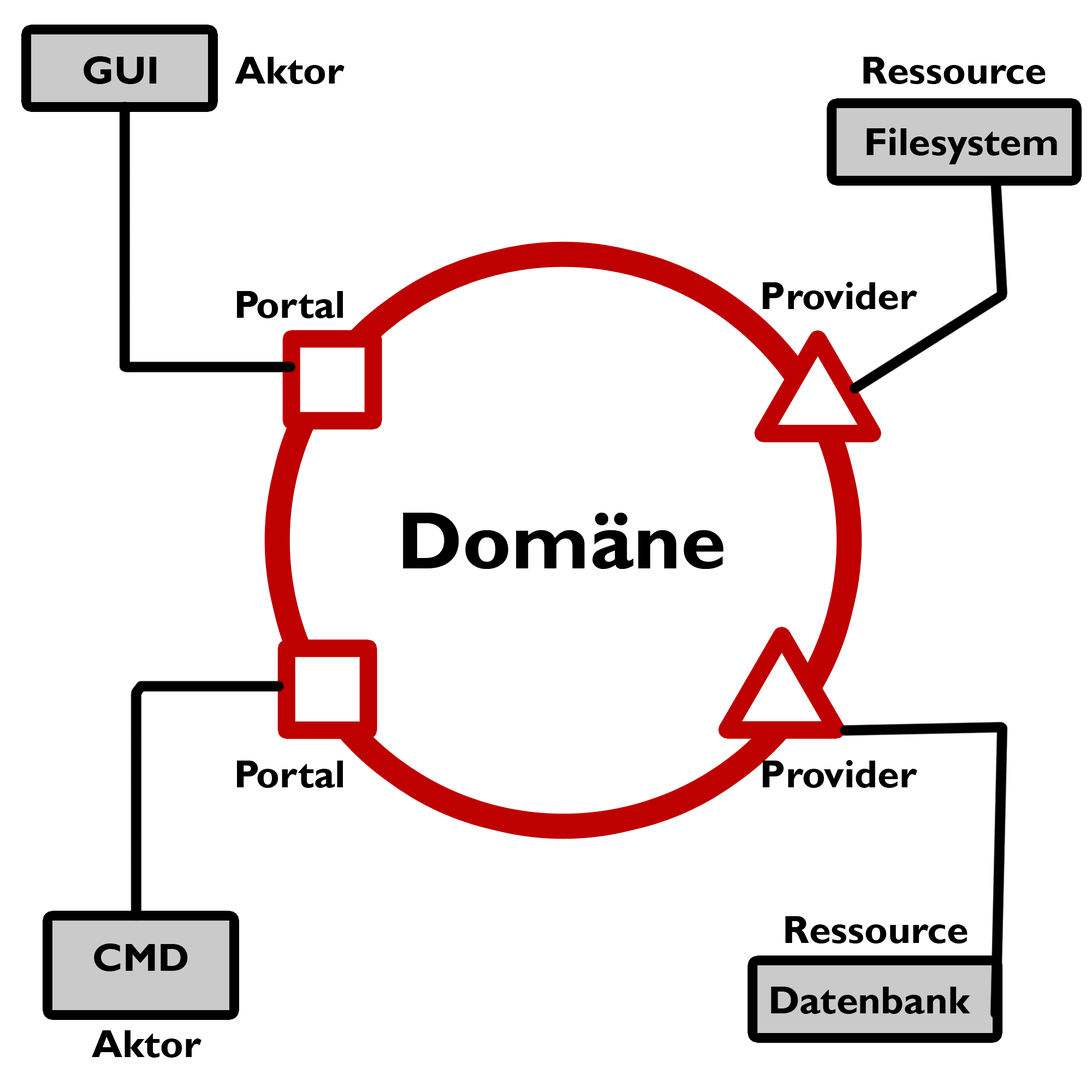
<style>
.page{position:relative;width:1092px;height:1092px;background:#ffffff}
.page>*{position:absolute;margin:0}
.t1{font:39.3px "GillSansMT-Bold";color:#000000}
.t2{font:81.9px "GillSansMT-Bold";color:#000000}
</style>
<div class="page">
<p class="t1" style="left:84px;top:56px;width:73px;height:28px">GUI</p>
<p class="t1" style="left:235px;top:57px;width:110px;height:27px">Aktor</p>
<p class="t1" style="left:863px;top:57px;width:183px;height:27px">Ressource</p>
<p class="t1" style="left:866px;top:128px;width:191px;height:36px">Filesystem</p>
<p class="t1" style="left:763px;top:282px;width:154px;height:28px">Provider</p>
<p class="t1" style="left:237px;top:291px;width:106px;height:27px">Portal</p>
<p class="t2" style="left:403px;top:512px;width:320px;height:57px">Domäne</p>
<p class="t1" style="left:237px;top:761px;width:106px;height:27px">Portal</p>
<p class="t1" style="left:763px;top:760px;width:154px;height:28px">Provider</p>
<p class="t1" style="left:785px;top:916px;width:182px;height:27px">Ressource</p>
<p class="t1" style="left:94px;top:943px;width:94px;height:28px">CMD</p>
<p class="t1" style="left:771px;top:987px;width:199px;height:27px">Datenbank</p>
<p class="t1" style="left:92px;top:1030px;width:109px;height:28px">Aktor</p>
</div>
